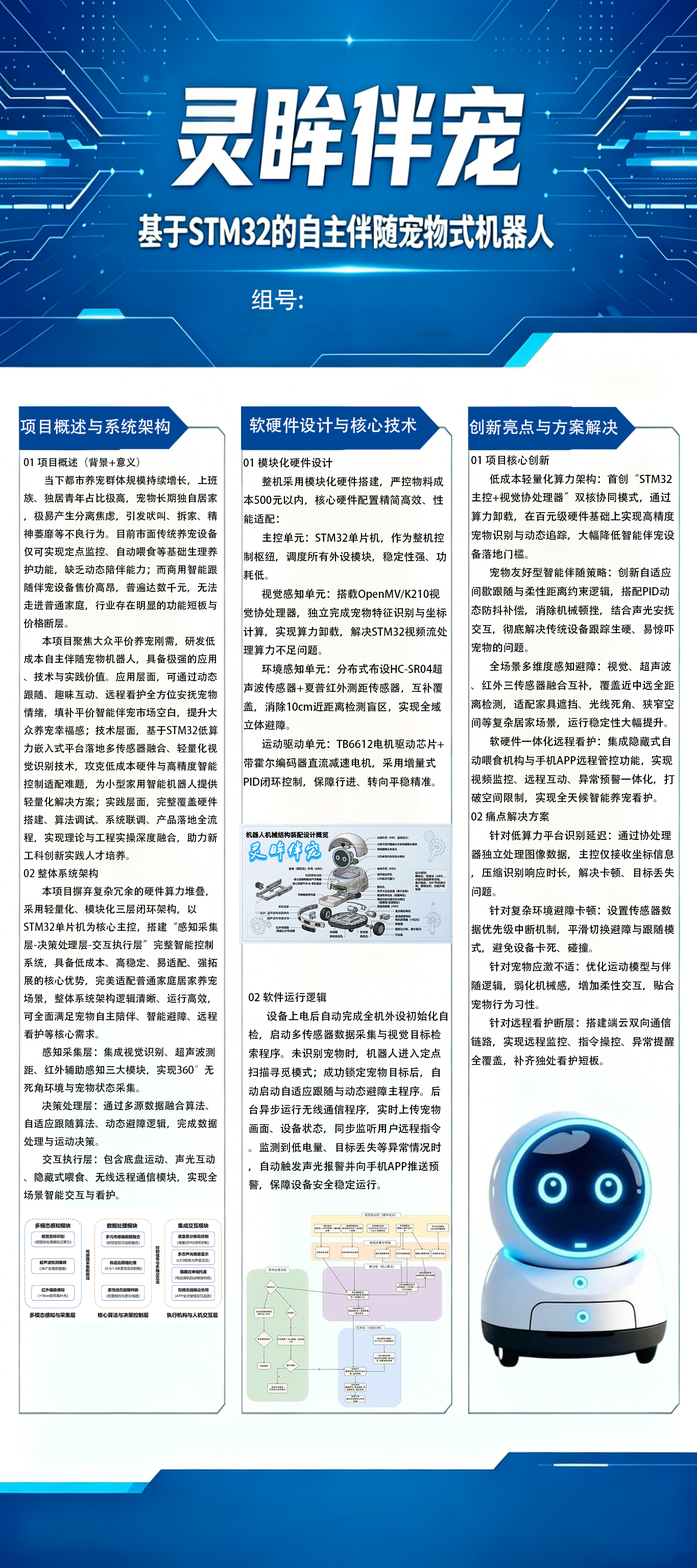
<style>
.page{position:relative;width:697px;height:1568px}
.page>*{position:absolute;margin:0}
.t1{font:23.4px "AdobeHeitiStd-Regular";color:#ffffff}
.t2{font:10.2px "AdobeHeitiStd-Regular";color:#000000}
.t3{font:10.7px "AdobeHeitiStd-Regular";color:#000000}
</style>
<div class="page">
<p class="t1" style="left:252px;top:289px;width:51px;height:21px">组号:</p>
<p class="t2" style="left:23px;top:457px;width:195px;height:743px">01 项目概述（背景+意义）<br>         当下都市养宠群体规模持续增长，上班族、独居青年占比极高，宠物长期独自居家，极易产生分离焦虑，引发吠叫、拆家、精神萎靡等不良行为。目前市面传统养宠设备仅可实现定点监控、自动喂食等基础生理养护功能，缺乏动态陪伴能力；而商用智能跟随伴宠设备售价高昂，普遍达数千元，无法走进普通家庭，行业存在明显的功能短板与价格断层。<br> 本项目聚焦大众平价养宠刚需，研发低成本自主伴随宠物机器人，具备极强的应用、技术与实践价值。应用层面，可通过动态跟随、趣味互动、远程看护全方位安抚宠物情绪，填补平价智能伴宠市场空白，提升大众养宠幸福感；技术层面，基于STM32低算力嵌入式平台落地多传感器融合、轻量化视觉识别技术，攻克低成本硬件与高精度智能控制适配难题，为小型家用智能机器人提供轻量化解决方案；实践层面，完整覆盖硬件搭建、算法调试、系统联调、产品落地全流程，实现理论与工程实操深度融合，助力新工科创新实践人才培养。<br>02 整体系统架构<br> 本项目摒弃复杂冗余的硬件算力堆叠，采用轻量化、模块化三层闭环架构，以STM32单片机为核心主控，搭建“感知采集层-决策处理层-交互执行层”完整智能控制系统，具备低成本、高稳定、易适配、强拓展的核心优势，完美适配普通家庭居家养宠场景，整体系统架构逻辑清晰、运行高效，可全面满足宠物自主陪伴、智能避障、远程看护等核心需求。<br>  感知采集层：集成视觉识别、超声波测距、红外辅助感知三大模块，实现360°无死角环境与宠物状态采集。<br> 决策处理层：通过多源数据融合算法、自适应跟随算法、动态避障逻辑，完成数据处理与运动决策。<br> 交互执行层：包含底盘运动、声光互动、隐藏式喂食、无线远程通信模块，实现全场景智能交互与看护。</p>
<p class="t3" style="left:243px;top:457px;width:204px;height:330px">01 模块化硬件设计<br> 整机采用模块化硬件搭建，严控物料成本500元以内，核心硬件配置精简高效、性能适配：<br> 主控单元：STM32单片机，作为整机控制枢纽，调度所有外设模块，稳定性强、功耗低。<br> 视觉感知单元：搭载OpenMV/K210视觉协处理器，独立完成宠物特征识别与坐标计算，实现算力卸载，解决STM32视频流处理算力不足问题。<br> 环境感知单元：分布式布设HC-SR04超声波传感器+夏普红外测距传感器，互补覆盖，消除10cm近距离检测盲区，实现全域立体避障。<br> 运动驱动单元：TB6612电机驱动芯片+带霍尔编码器直流减速电机，采用增量式PID闭环控制，保障行进、转向平稳精准。</p>
<p class="t3" style="left:471px;top:455px;width:203px;height:611px">01 项目核心创新<br> 低成本轻量化算力架构：首创“STM32主控+视觉协处理器”双核协同模式，通过算力卸载，在百元级硬件基础上实现高精度宠物识别与动态追踪，大幅降低智能伴宠设备落地门槛。<br> 宠物友好型智能伴随策略：创新自适应间歇跟随与柔性距离约束逻辑，搭配PID动态防抖补偿，消除机械顿挫，结合声光安抚交互，彻底解决传统设备跟踪生硬、易惊吓宠物的问题。<br> 全场景多维度感知避障：视觉、超声波、红外三传感器融合互补，覆盖近中远全距离检测，适配家具遮挡、光线死角、狭窄空间等复杂居家场景，运行稳定性大幅提升。<br> 软硬件一体化远程看护：集成隐藏式自动喂食机构与手机APP远程管控功能，实现视频监控、远程互动、异常预警一体化，打破空间限制，实现全天候智能养宠看护。<br>02 痛点解决方案<br> 针对低算力平台识别延迟：通过协处理器独立处理图像数据，主控仅接收坐标信息，压缩识别响应时长，解决卡顿、目标丢失问题。<br> 针对复杂环境避障卡顿：设置传感器数据优先级中断机制，平滑切换避障与跟随模式，避免设备卡死、碰撞。<br> 针对宠物应激不适：优化运动模型与伴随逻辑，弱化机械感，增加柔性交互，贴合宠物行为习性。<br> 针对远程看护断层：搭建端云双向通信链路，实现远程监控、指令操控、异常提醒全覆盖，补齐独处看护短板。</p>
<p class="t3" style="left:248px;top:992px;width:200px;height:198px">02 软件运行逻辑<br> 设备上电后自动完成全机外设初始化自检，启动多传感器数据采集与视觉目标检索程序。未识别宠物时，机器人进入定点扫描寻觅模式；成功锁定宠物目标后，自动启动自适应跟随与动态避障主程序。后台异步运行无线通信程序，实时上传宠物画面、设备状态，同步监听用户远程指令。监测到低电量、目标丢失等异常情况时，自动触发声光报警并向手机APP推送预警，保障设备安全稳定运行。</p>
</div>
